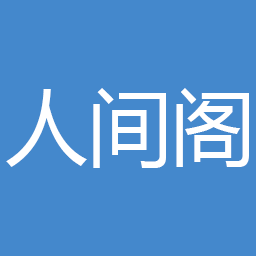
<style>
.page{position:relative;width:256px;height:256px;background:#4488cc}
.page>*{position:absolute;margin:0}
.t1{font:83.3px "MicrosoftYaHei";color:#ffffff}
</style>
<div class="page">
<p class="t1" style="left:6px;top:88px;width:243px;height:80px">人间阁</p>
</div>
